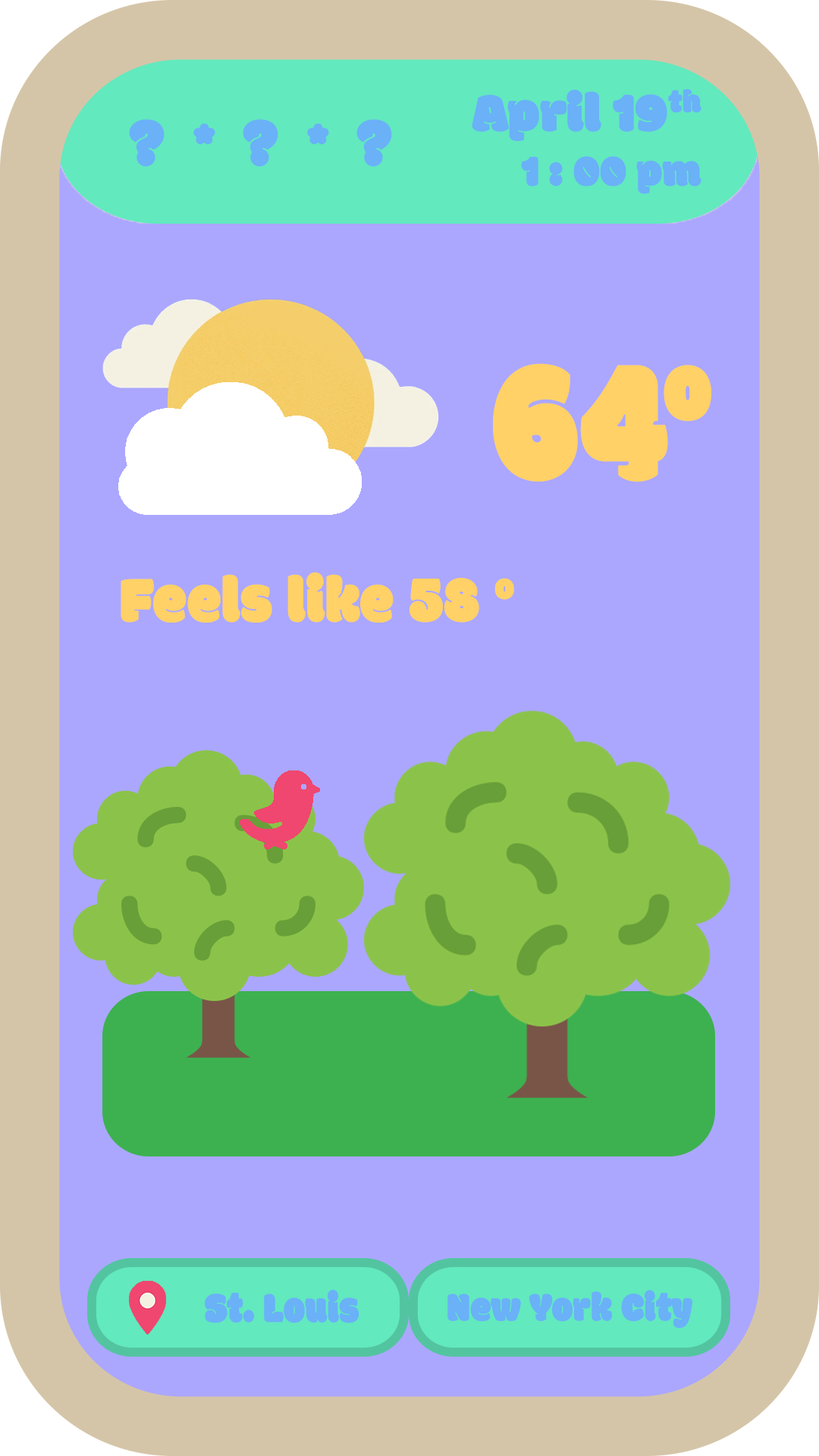
<style>
.page{position:relative;width:819px;height:1456px;background:#aba7ff}
.page>*{position:absolute;margin:0}
.t1{font:179.7px "Modak";letter-spacing:0.005em;color:#ffd166;scale:0.85 1}
.t2{font:67.7px "Modak";letter-spacing:0.005em;color:#ffd166;scale:0.91 1}
.t3{font:44.3px "Modak";letter-spacing:0.005em;color:#6ab1f7;scale:0.86 1}
.t4{font:41.9px "Modak";letter-spacing:0.005em;color:#6ab1f7;scale:0.9 1}
</style>
<div class="page">
<p class="t1" style="left:493px;top:363px;width:218px;height:119px">64°</p>
<p class="t2" style="left:121px;top:572px;width:393px;height:51px">Feels like 58 °</p>
<p class="t3" style="left:205px;top:1289px;width:154px;height:34px">St. Louis</p>
<p class="t4" style="left:447px;top:1290px;width:245px;height:39px">New York City</p>
</div>
